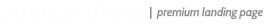
<style>
.page{position:relative;width:266px;height:24px;background:#ffffff}
.page>*{position:absolute;margin:0}
.t1{font:12px "Cabin-Italic";letter-spacing:-0.01em;color:#8b8b8b}
.t2{font:12px "Cabin-Regular";letter-spacing:-0.01em;color:#8b8b8b}
</style>
<div class="page">
<p class="t1" style="left:150px;top:7px;width:113px;height:13px"><span class="t2">|  </span>premium landing page</p>
</div>
